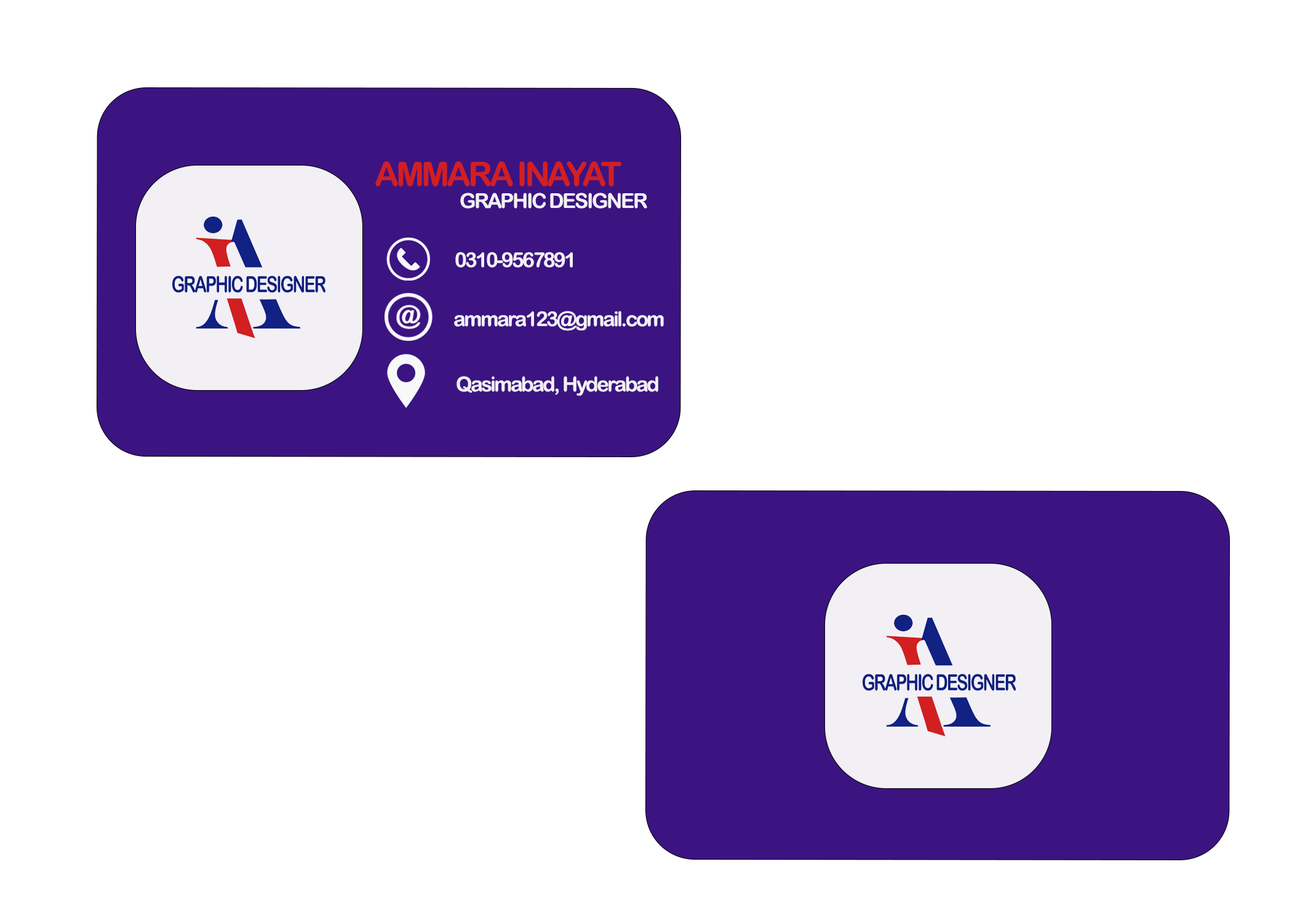
<style>
.page{position:relative;width:1292px;height:923px;background:#ffffff}
.page>*{position:absolute;margin:0}
.t1{font:33.3px "ArialRoundedMTBold";letter-spacing:-0.08em;color:#d21f22}
.t2{font:20.5px "ArialRoundedMTBold";letter-spacing:-0.08em;color:#f2f0f5}
</style>
<div class="page">
<p class="t1" style="left:375px;top:161px;width:247px;height:25px">AMMARA INAYAT</p>
<p class="t2" style="left:460px;top:193px;width:187px;height:16px">GRAPHIC DESIGNER</p>
<p class="t2" style="left:455px;top:252px;width:118px;height:16px">0310-9567891</p>
<p class="t2" style="left:454px;top:311px;width:210px;height:20px">ammara123@gmail.com</p>
<p class="t2" style="left:457px;top:376px;width:201px;height:20px">Qasimabad, Hyderabad</p>
</div>
